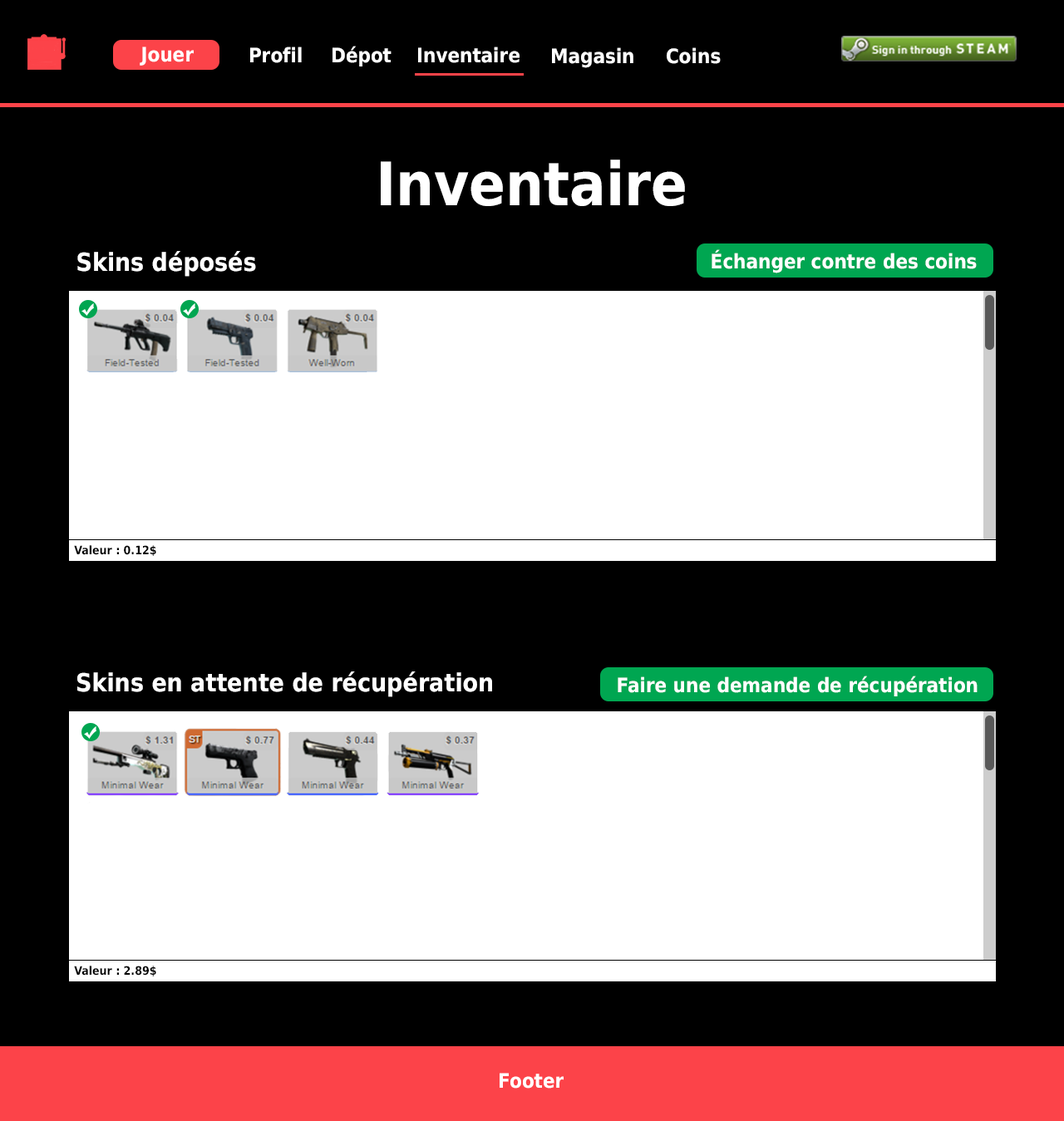
<style>
.page{position:relative;width:1064px;height:1121px;background:#000000}
.page>*{position:absolute;margin:0}
.t1{font:59.8px "DejaVuSansCondensed-Bold";color:#ffffff}
.t2{font:24.9px "DejaVuSansCondensed-Bold";color:#ffffff}
.t3{font:19.9px "DejaVuSansCondensed-Bold";color:#ffffff}
.t4{font:11.6px "DejaVuSansCondensed-Bold";color:#000000}
</style>
<div class="page">
<p class="t1" style="left:381px;top:160px;width:304px;height:46px">Inventaire</p>
<p class="t2" style="left:77px;top:251px;width:179px;height:26px">Skins déposés</p>
<p class="t3" style="left:711px;top:249px;width:265px;height:24px">Échanger contre des coins</p>
<p class="t4" style="left:74px;top:545px;width:82px;height:11px">Valeur : 0.12$</p>
<p class="t2" style="left:77px;top:671px;width:415px;height:26px">Skins en attente de récupération</p>
<p class="t3" style="left:617px;top:676px;width:360px;height:20px">Faire une demande de récupération</p>
<p class="t4" style="left:74px;top:966px;width:82px;height:10px">Valeur : 2.89$</p>
</div>
